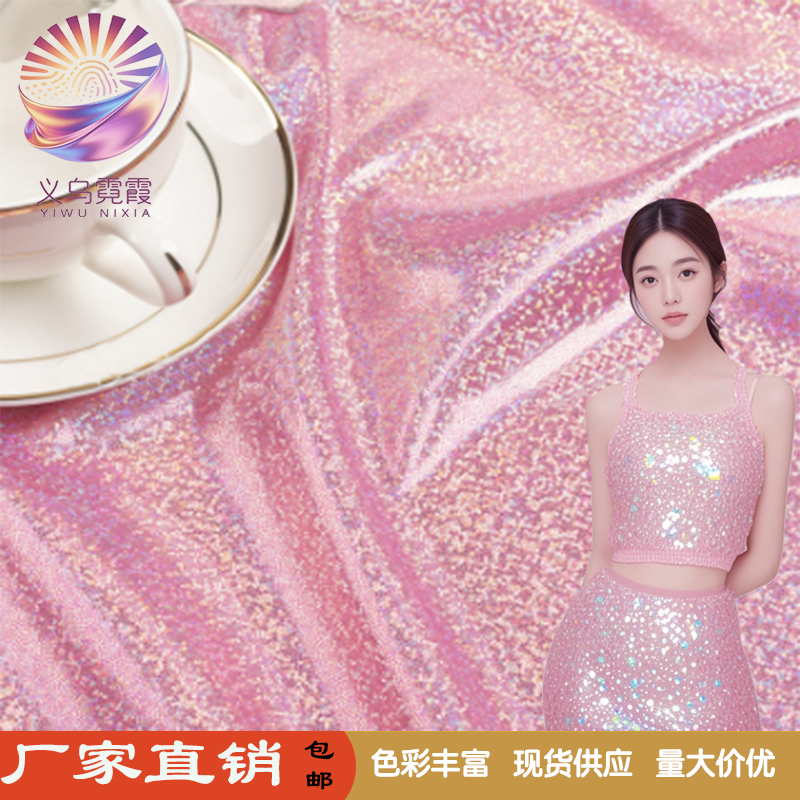
<style>
.page{position:relative;width:800px;height:800px}
.page>*{position:absolute;margin:0}
.t1{font:72px "STBaoliSC-Regular";color:#f1f7f2}
.t2{font:30px/30px "STBaoliSC-Regular";color:#030303}
.t3{font:30px "STYuanti-SC-Bold";color:#ffffff}
.t4{font:30px "STBaoliSC-Regular";color:#030303}
</style>
<div class="page">
<p class="t1" style="left:0px;top:739px;width:281px;height:47px">厂家直销</p>
<p class="t2" style="left:304px;top:740px;width:30px;height:50px;text-align:center">包<br>   邮</p>
<p class="t3" style="left:371px;top:748px;width:404px;height:30px"><span class="t4">                                        </span>色彩丰富   现货供应   量大价优</p>
</div>
